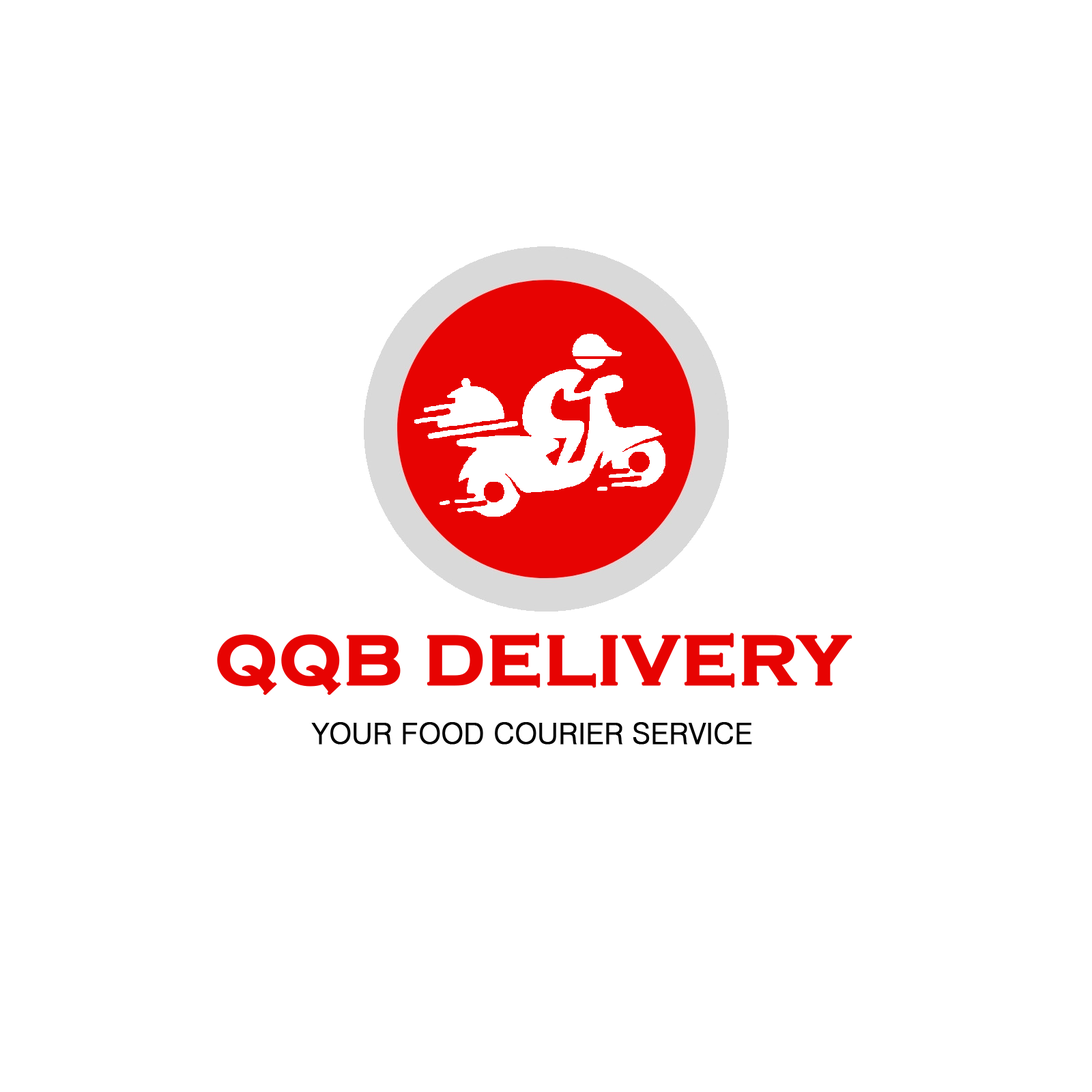
<style>
.page{position:relative;width:1092px;height:1092px;background:#ffffff}
.page>*{position:absolute;margin:0}
.t1{font:72.8px "CopperplateGothic-Bold";color:#e70302;font-weight:bold}
.t2{font:29.1px "Swiss721BT-Light";color:#000000;font-weight:bold}
</style>
<div class="page">
<p class="t1" style="left:217px;top:633px;width:635px;height:62px">QQB DELIVERY</p>
<p class="t2" style="left:311px;top:722px;width:441px;height:23px">YOUR FOOD COURIER SERVICE</p>
</div>
